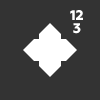
<style>
.page{position:relative;width:100px;height:100px;background:#333333}
.page>*{position:absolute;margin:0}
.t1{font:14px "Geometria-ExtraBold";color:#ffffff}
</style>
<div class="page">
<p class="t1" style="left:70px;top:10px;width:13px;height:10px">12</p>
<p class="t1" style="left:73px;top:23px;width:8px;height:11px">3</p>
</div>
